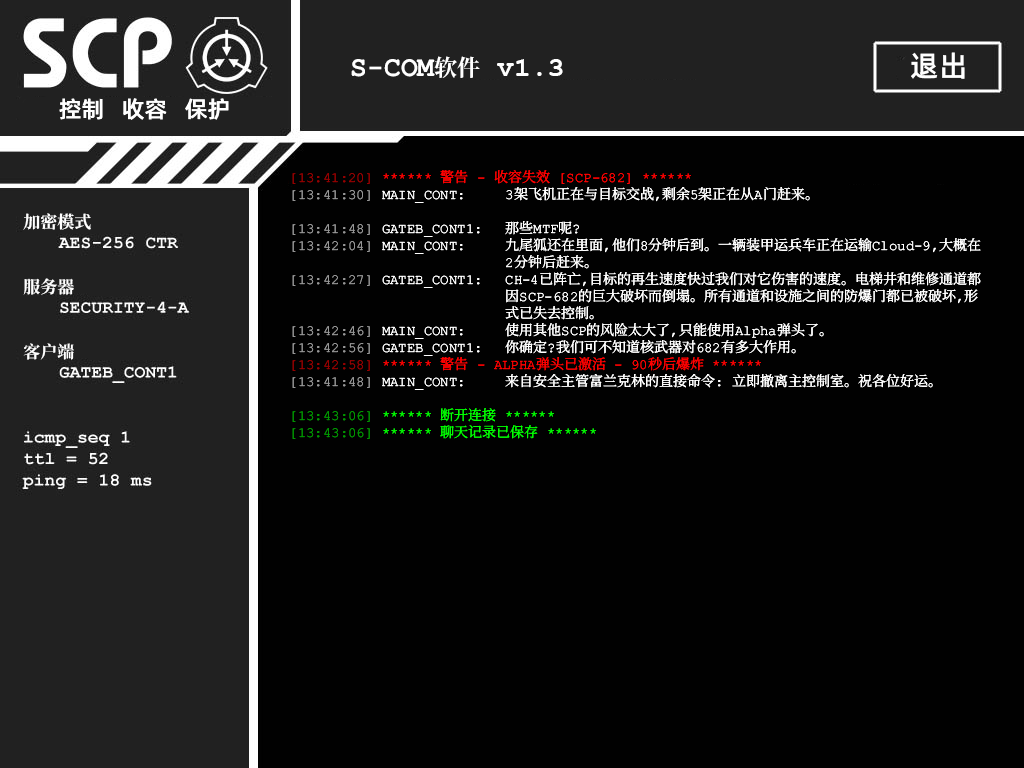
<style>
.page{position:relative;width:1024px;height:768px;background:#010101}
.page>*{position:absolute;margin:0}
.t1{font:29px "AlibabaPuHuiTiM";color:#ffffff}
.t2{font:28px "ContainmentBreach-Bold";color:#ffffff}
.t3{font:23px "ContainmentBreach-Bold";color:#ffffff}
.t4{font:28px "CourierNewPS-BoldMT";color:#ffffff}
.t5{font:23px "AlibabaPuHuiTiM";color:#ffffff}
.t6{font:14px/17px "ContainmentBreach-Regular";color:#ffffff}
.t7{font:14px/17px "ContainmentBreach-Regular";color:#960000}
.t8{font:14px/17px "ContainmentBreach-Regular";color:#ff0000}
.t9{font:14px/17px "ContainmentBreach-Regular";color:#969696}
.t10{font:14px/17px "ContainmentBreach-Regular";color:#009600}
.t11{font:14px/17px "ContainmentBreach-Regular";color:#00ff00}
.t12{font:17px/15px "ContainmentBreach-Bold";color:#ffffff}
.t13{font:17px/17px "ContainmentBreach-Bold";color:#ffffff}
.t14{font:17px/13px "ContainmentBreach-Bold";color:#ffffff}
</style>
<div class="page">
<p class="t1" style="left:911px;top:52px;width:54px;height:27px">退出</p>
<p class="t2" style="left:351px;top:56px;width:212px;height:22px">S-COM<span class="t3">软件 </span><span class="t4">v1.3</span></p>
<p class="t5" style="left:59px;top:98px;width:170px;height:22px">控制   收容   保护</p>
<p class="t6" style="left:292px;top:170px;width:689px;height:269px"><span class="t7">[13：41:20]</span><span class="t8"> ****** 警告 - 收容失效 【SCP-682】 ******<br></span><span class="t9">【13:41:30】</span> MAIN_CONT:  3架飞机正在与目标交战，剩余5架正在从A门赶来。<br><br><span class="t9">【13:41:48】</span> GATEB_CONT1: 那些MTF呢？<br><span class="t9">【13:42:04】</span> MAIN_CONT:  九尾狐还在里面，他们8分钟后到。一辆装甲运兵车正在运输Cloud-9，大概在<br>      2分钟后赶来。<br><span class="t9">【13:42:27】</span> GATEB_CONT1: CH-4已阵亡，目标的再生速度快过我们对它伤害的速度。电梯井和维修通道都<br>      因SCP-682的巨大破坏而倒塌。所有通道和设施之间的防爆门都已被破坏，形<br>      式已失去控制。<br><span class="t9">【13:42:46】</span> MAIN_CONT：  使用其他SCP的风险太大了，只能使用Alpha弹头了。<br><span class="t9">【13:42:56】</span> GATEB_CONT1: 你确定？我们可不知道核武器对682有多大作用。<br><span class="t7">[13:42:58]</span><span class="t8"> ****** 警告 - ALPHA弹头已激活 - 90秒后爆炸 ******<br></span><span class="t9">【13:41:48】</span> MAIN_CONT:  来自安全主管富兰克林的直接命令： 立即撤离主控制室。祝各位好运。<br><br><span class="t10">[13：43:06]</span><span class="t11"> ****** 断开连接 ******<br></span><span class="t10">[13:43:06]</span><span class="t11"> ****** 聊天记录已保存 ******</span></p>
<p class="t12" style="left:23px;top:213px;width:68px;height:147px">加密模式<br><br><br><span class="t13"><br>服务器<br><br><br></span><span class="t14"><br>客户端</span></p>
</div>
